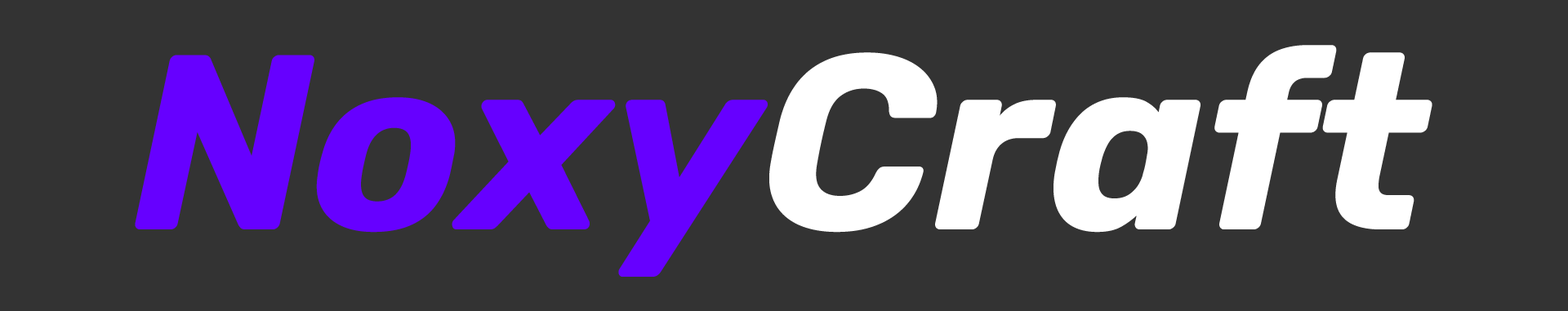
<style>
.page{position:relative;width:1568px;height:311px;background:#333333}
.page>*{position:absolute;margin:0}
.t1{font:249.1px "RubikItalic-BoldItalic";color:#ffffff}
.t2{font:249.1px "RubikItalic-BoldItalic";color:#6600ff}
</style>
<div class="page">
<p class="t1" style="left:135px;top:45px;width:1297px;height:232px"><span class="t2">Noxy</span>Craft</p>
</div>
